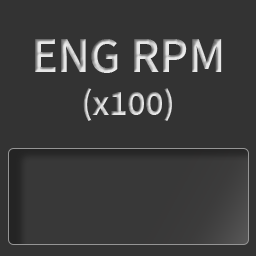
<style>
.page{position:relative;width:256px;height:256px;background:#333333}
.page>*{position:absolute;margin:0}
.t1{font:50px "SourceSansPro-SemiBold";letter-spacing:-0.01em}
.t2{font:36px "SourceSansPro-SemiBold";letter-spacing:-0.01em}
</style>
<div class="page">
<p class="t1" style="left:35px;top:39px;width:187px;height:82px;text-align:center">ENG RPM<br><span class="t2">(x100)</span></p>
</div>
